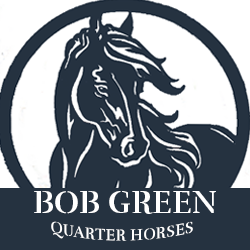
<style>
.page{position:relative;width:250px;height:250px;background:#253240}
.page>*{position:absolute;margin:0}
.t1{font:32px "Rufina-Stencil-Bold";color:#ffffff}
.t2{font:16px "Rufina-Stencil-Bold";color:#ffffff}
</style>
<div class="page">
<p class="t1" style="left:34px;top:191px;width:182px;height:23px">BOB GREEN</p>
<p class="t2" style="left:51px;top:221px;width:142px;height:20px">QUARTER HORSES</p>
</div>
